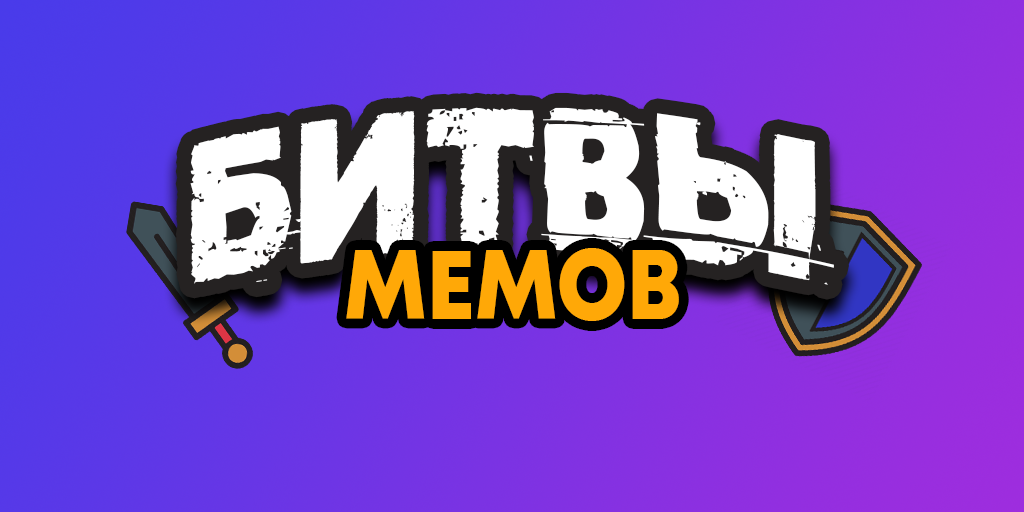
<style>
.page{position:relative;width:1024px;height:512px}
.page>*{position:absolute;margin:0}
.t1{font:206.2px "Cutthecrap";color:#ffffff}
.t2{font:97.6px "Mont-HeavyDEMO";color:#ffa807;scale:0.86 1}
</style>
<div class="page">
<p class="t1" style="left:190px;top:107px;width:644px;height:178px">БИТВЫ</p>
<p class="t2" style="left:346px;top:248px;width:333px;height:73px">МЕМОВ</p>
</div>
